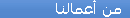
<style>
.page{position:relative;width:130px;height:18px}
.page>*{position:absolute;margin:0}
.t1{font:14px "Tahoma-Bold";color:#ffffff}
</style>
<div class="page">
<p class="t1" style="left:56px;top:0px;width:65px;height:17px">من أعمالنا</p>
</div>
